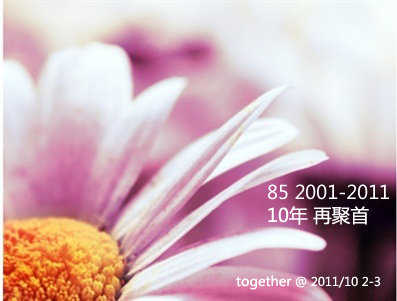
<style>
.page{position:relative;width:397px;height:301px}
.page>*{position:absolute;margin:0}
.t1{font:18.7px "MicrosoftYaHei";color:#ffffff}
.t2{font:12px "MicrosoftYaHei";color:#ffffff}
.t3{font:13.3px "MicrosoftYaHei";color:#ffffff}
</style>
<div class="page">
<p class="t1" style="left:268px;top:184px;width:121px;height:16px">85 2001-2011</p>
<p class="t1" style="left:268px;top:206px;width:101px;height:19px">10年 再聚首</p>
<p class="t2" style="left:236px;top:275px;width:145px;height:15px"><span class="t3">together</span> @ 2011/10 2-3</p>
</div>
